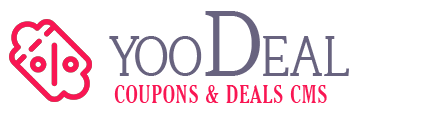
<style>
.page{position:relative;width:424px;height:118px;background:#ffffff}
.page>*{position:absolute;margin:0}
.t1{font:53.8px "Tugano-DEMO";color:#68637f;text-transform:uppercase;scale:0.89 1}
.t2{font:87.4px "Tugano-DEMO";color:#68637f;text-transform:uppercase;scale:0.89 1}
.t3{font:24.6px "Thyssen-J";letter-spacing:0.03em;color:#f91653;text-transform:uppercase;scale:0.89 1}
</style>
<div class="page">
<p class="t1" style="left:109px;top:11px;width:240px;height:65px">Yoo<span class="t2">d</span>eal</p>
<p class="t3" style="left:114px;top:85px;width:213px;height:18px">Coupons &amp; deals CMS</p>
</div>
